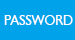
<style>
.page{position:relative;width:75px;height:40px;background:#00a2e9}
.page>*{position:absolute;margin:0}
.t1{font:13.9px "Humanist521BT-Roman";color:#fefefe}
</style>
<div class="page">
<p class="t1" style="left:4px;top:15px;width:69px;height:10px">PASSWORD</p>
</div>
